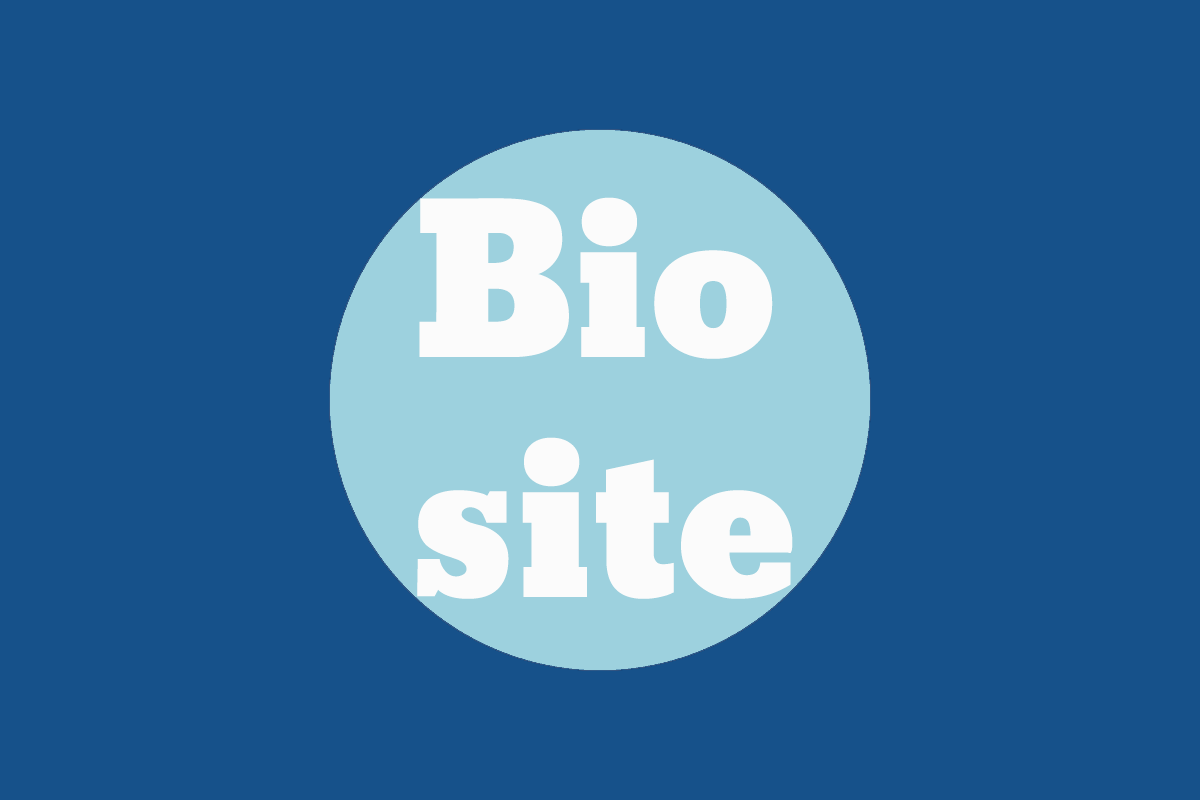
<style>
.page{position:relative;width:1200px;height:800px;background:#16518a}
.page>*{position:absolute;margin:0}
.t1{font:200px "Bevan";color:#fbfbfb}
</style>
<div class="page">
<p class="t1" style="left:417px;top:197px;width:376px;height:402px">Bio<br>site</p>
</div>
